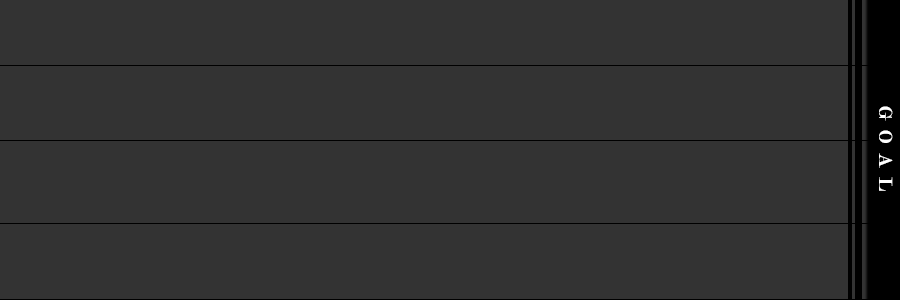
<style>
.page{position:relative;width:900px;height:300px;background:#333333}
.page>*{position:absolute;margin:0}
.t1{font:20px "Modern-Regular";letter-spacing:0.5em;color:#ffffff;font-weight:bold}
</style>
<div class="page">
<p class="t1" style="left:879px;top:106px;width:14px;height:85px;rotate:90deg">GOAL</p>
</div>
